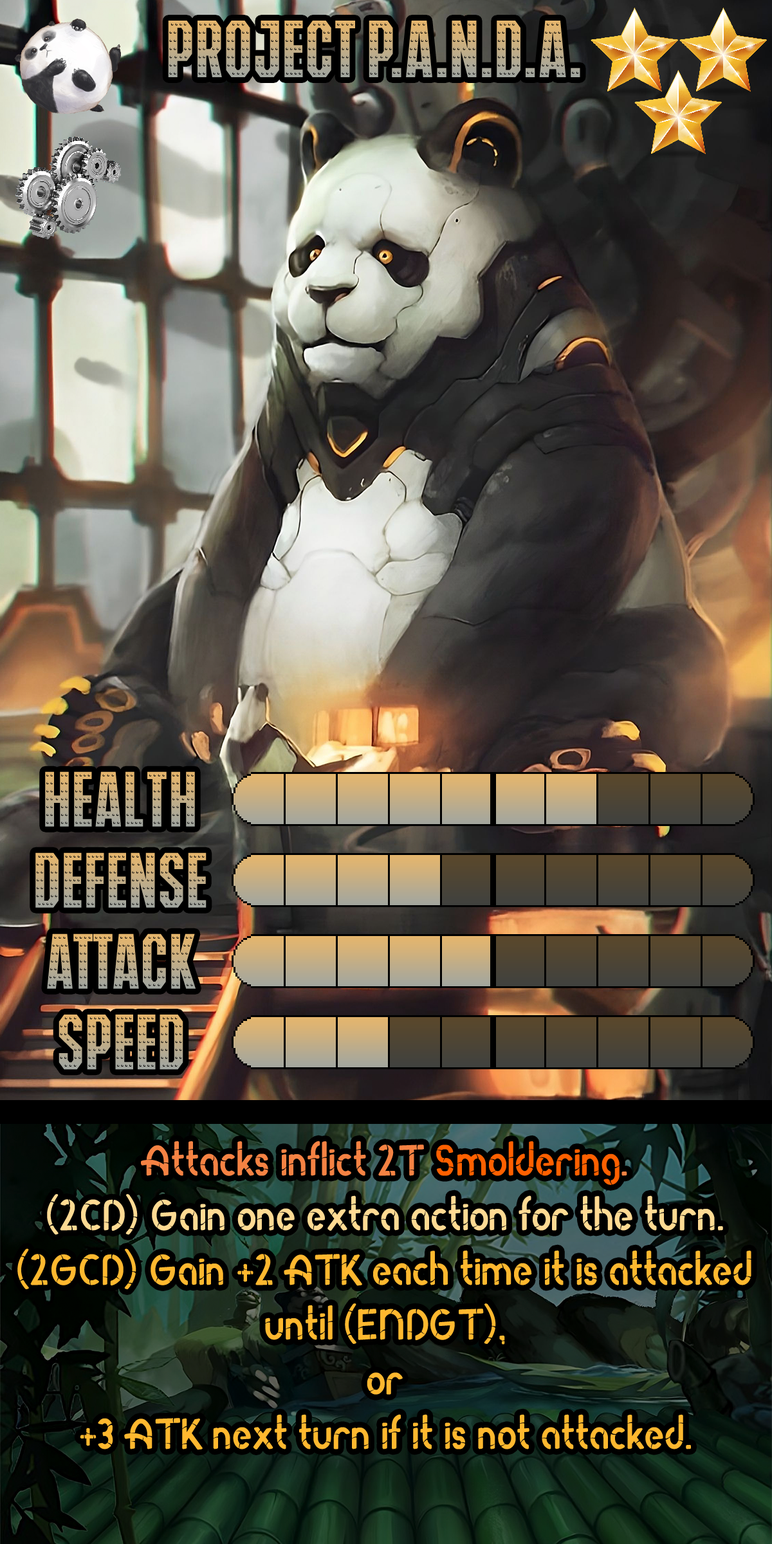
<style>
.page{position:relative;width:772px;height:1544px}
.page>*{position:absolute;margin:0}
.t1{font:133.2px "IRONMANOFWAR001BNCV"}
.t2{font:128.7px "IRONMANOFWAR001BNCV"}
.t3{font:74px/54.7px "RodaBamboo";color:#ffb82f}
.t4{font:74px/54.7px "RodaBamboo";color:#f58243}
.t5{font:74px/54.7px "RodaBamboo";color:#ff6000}
.t6{font:74px/54.7px "RodaBamboo";color:#ffda93}
</style>
<div class="page">
<p class="t1" style="left:168px;top:21px;width:412px;height:56px">Project P.A.N.D.A.</p>
<p class="t2" style="left:45px;top:772px;width:150px;height:55px">Health</p>
<p class="t2" style="left:35px;top:853px;width:172px;height:55px">Defense</p>
<p class="t2" style="left:47px;top:934px;width:149px;height:55px">Attack</p>
<p class="t2" style="left:59px;top:1015px;width:124px;height:55px">Speed</p>
<p class="t3" style="left:17px;top:1141px;width:735px;height:309px;text-align:center"><span class="t4">Attacks inflict 2T </span><span class="t5">Smoldering</span><span class="t4">.<br></span><span class="t6">(2CD) Gain one extra action for the turn.<br></span>(2GCD) Gain +2 ATK each time it is attacked until (ENDGT),<br>or<br>+3 ATK next turn if it is not attacked.</p>
</div>
